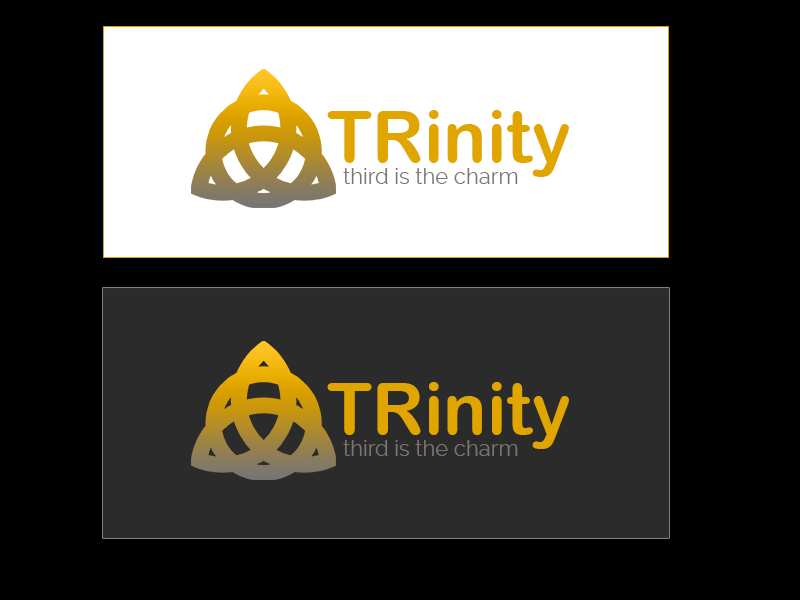
<style>
.page{position:relative;width:800px;height:600px;background:#000000}
.page>*{position:absolute;margin:0}
.t1{font:72px "ArialRoundedMTBold";color:#e1a500}
.t2{font:22px "Raleway";color:#7b7570}
</style>
<div class="page">
<p class="t1" style="left:327px;top:110px;width:242px;height:67px">TRinity</p>
<p class="t2" style="left:343px;top:168px;width:175px;height:16px">third is the charm</p>
<p class="t1" style="left:327px;top:382px;width:242px;height:67px">TRinity</p>
<p class="t2" style="left:343px;top:440px;width:175px;height:16px">third is the charm</p>
</div>
